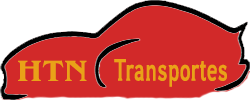
<style>
.page{position:relative;width:250px;height:100px;background:#d22929}
.page>*{position:absolute;margin:0}
.t1{font:30px "Benguiat-Medium";color:#e9a218;scale:1.14 1}
.t2{font:29.8px "IdeologicaBold";color:#e9a218;scale:0.65 1}
</style>
<div class="page">
<p class="t1" style="left:18px;top:60px;width:69px;height:21px">HTN</p>
<p class="t2" style="left:114px;top:59px;width:113px;height:28px">Transportes</p>
</div>
